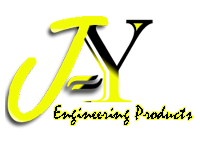
<style>
.page{position:relative;width:200px;height:142px;background:#ffffff}
.page>*{position:absolute;margin:0}
.t1{font:20.1px "Mistral";letter-spacing:0.005em;color:#000000}
</style>
<div class="page">
<p class="t1" style="left:54px;top:105px;width:138px;height:20px">Engineering Products</p>
</div>
